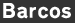
<style>
.page{position:relative;width:75px;height:23px;background:#333333}
.page>*{position:absolute;margin:0}
.t1{font:20px "Transport-Heavy-Regular";color:#ffffff}
</style>
<div class="page">
<p class="t1" style="left:3px;top:3px;width:68px;height:16px">Barcos</p>
</div>
